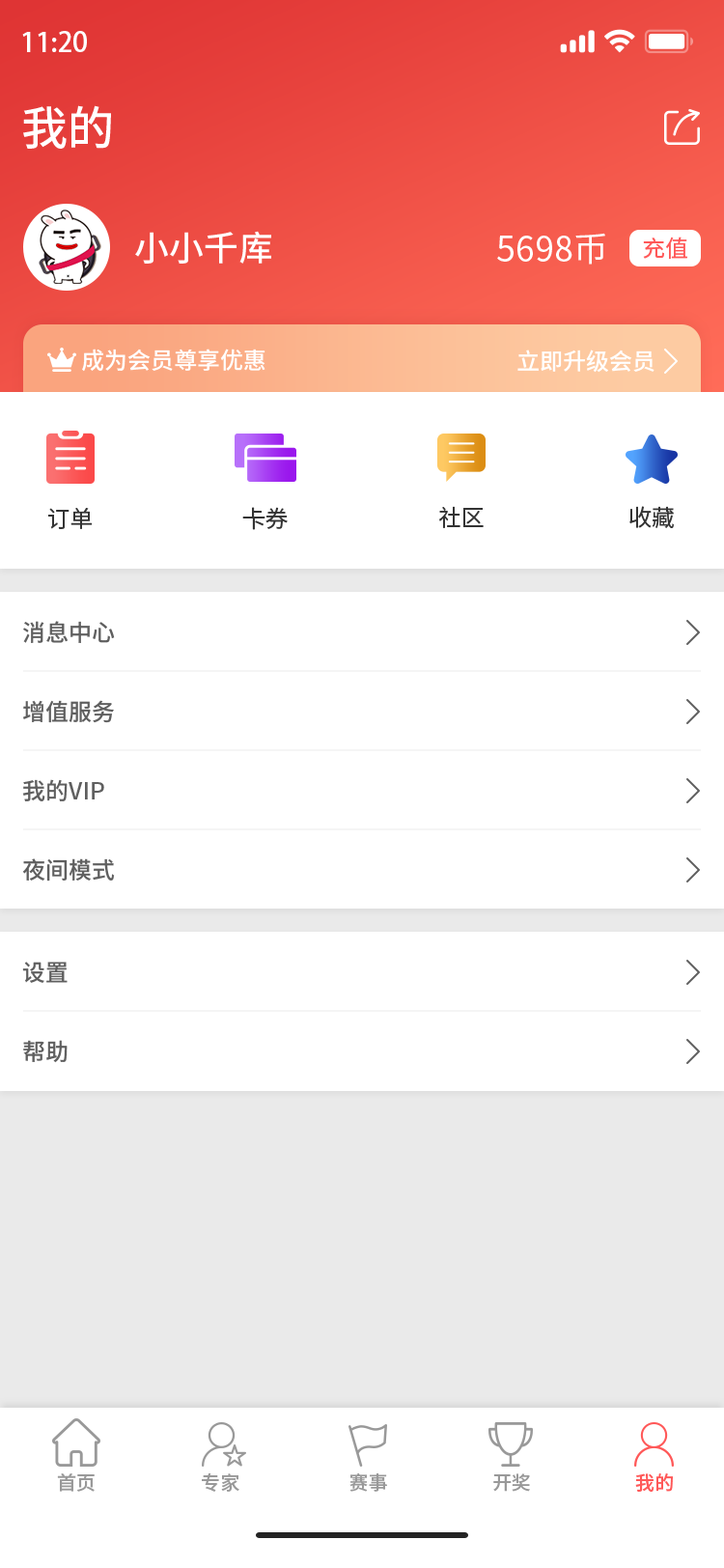
<style>
.page{position:relative;width:724px;height:1568px;background:#ffffff}
.page>*{position:absolute;margin:0}
.t1{font:27px "AdobeHeitiStd-Regular";color:#fefefe}
.t2{font:46.3px "SourceHanSansCN-Medium";color:#ffffff}
.t3{font:34.8px "SourceHanSansCN-Medium";color:#ffffff}
.t4{font:34.8px "SourceHanSansCN-Regular";color:#ffffff}
.t5{font:23.2px "SourceHanSansCN-Regular";color:#ff5858}
.t6{font:23.2px "SourceHanSansCN-Medium";color:#ffffff}
.t7{font:23.2px "SourceHanSansCN-Regular";color:#333333}
.t8{font:23.2px "SourceHanSansCN-Medium";color:#5f5f5f}
.t9{font:19.3px "SourceHanSansCN-Medium";color:#999999}
.t10{font:19.3px "SourceHanSansCN-Medium";color:#ff5858}
</style>
<div class="page">
<p class="t1" style="left:22px;top:31px;width:65px;height:21px">11:20</p>
<p class="t2" style="left:23px;top:105px;width:88px;height:44px">我的</p>
<p class="t3" style="left:135px;top:231px;width:136px;height:33px">小小千库</p>
<p class="t4" style="left:497px;top:233px;width:108px;height:32px">5698币</p>
<p class="t5" style="left:643px;top:237px;width:44px;height:23px">充值</p>
<p class="t6" style="left:82px;top:349px;width:184px;height:23px">成为会员尊享优惠</p>
<p class="t6" style="left:518px;top:350px;width:137px;height:23px">立即升级会员</p>
<p class="t7" style="left:48px;top:508px;width:45px;height:21px">订单</p>
<p class="t7" style="left:242px;top:507px;width:46px;height:23px">卡券</p>
<p class="t7" style="left:439px;top:506px;width:45px;height:22px">社区</p>
<p class="t7" style="left:630px;top:506px;width:44px;height:22px">收藏</p>
<p class="t8" style="left:23px;top:621px;width:92px;height:22px">消息中心</p>
<p class="t8" style="left:23px;top:700px;width:91px;height:23px">增值服务</p>
<p class="t8" style="left:22px;top:779px;width:82px;height:22px">我的VIP</p>
<p class="t8" style="left:22px;top:858px;width:93px;height:24px">夜间模式</p>
<p class="t8" style="left:22px;top:962px;width:46px;height:21px">设置</p>
<p class="t8" style="left:23px;top:1040px;width:45px;height:23px">帮助</p>
<p class="t9" style="left:57px;top:1473px;width:38px;height:19px">首页</p>
<p class="t9" style="left:202px;top:1473px;width:37px;height:19px">专家</p>
<p class="t9" style="left:350px;top:1473px;width:37px;height:19px">赛事</p>
<p class="t9" style="left:493px;top:1473px;width:37px;height:19px">开奖</p>
<p class="t10" style="left:635px;top:1473px;width:38px;height:19px">我的</p>
</div>
